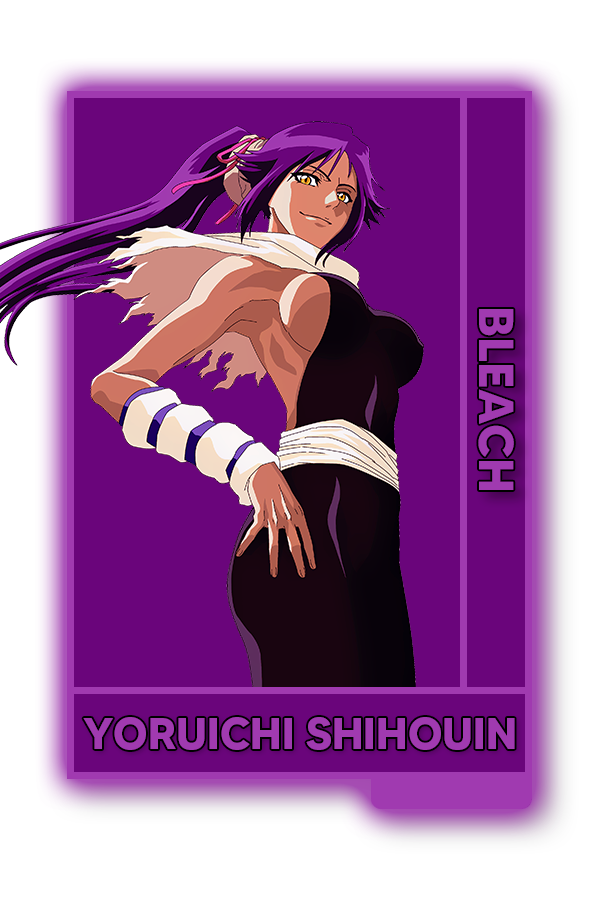
<style>
.page{position:relative;width:600px;height:900px;background:#6a057b}
.page>*{position:absolute;margin:0}
.t1{font:48.8px "MADETOMMY-Bold";color:#9d3fad}
.t2{font:43.9px "MADETOMMY-Bold";color:#9d3fad}
</style>
<div class="page">
<p class="t1" style="left:478px;top:309px;width:36px;height:181px;rotate:90deg">BLEACH</p>
<p class="t2" style="left:83px;top:717px;width:432px;height:33px">YORUICHI SHIHOUIN</p>
</div>
